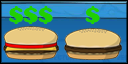
<style>
.page{position:relative;width:128px;height:64px}
.page>*{position:absolute;margin:0}
.t1{font:25px "Coolsville";color:#20cf03}
</style>
<div class="page">
<p class="t1" style="left:9px;top:6px;width:44px;height:18px">$$$</p>
<p class="t1" style="left:85px;top:6px;width:15px;height:18px">$</p>
</div>
